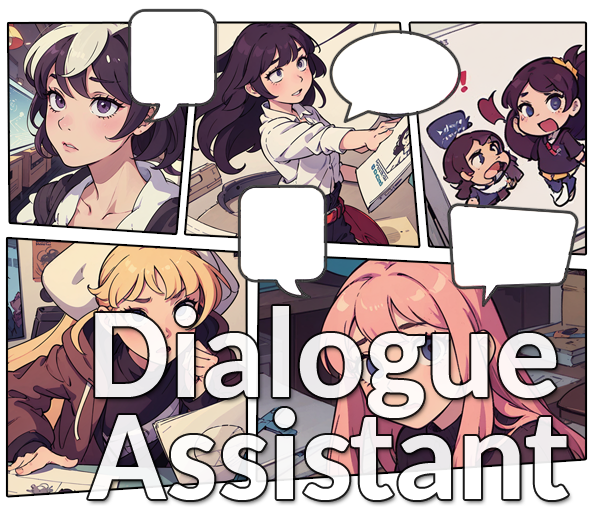
<style>
.page{position:relative;width:600px;height:522px;background:#ffffff}
.page>*{position:absolute;margin:0}
.t1{font:128.6px/101.8px "Carlito-Bold";color:#ffffff}
</style>
<div class="page">
<p class="t1" style="left:88px;top:306px;width:480px;height:194px;opacity:0.9">Dialogue<br>Assistant</p>
</div>
